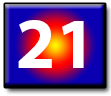
<style>
.page{position:relative;width:111px;height:96px}
.page>*{position:absolute;margin:0}
.t1{font:72px "MyriadPro-Bold";color:#ffffff}
</style>
<div class="page">
<p class="t1" style="left:18px;top:20px;width:66px;height:48px">21</p>
</div>
